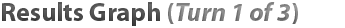
<style>
.page{position:relative;width:345px;height:28px;background:#ffffff}
.page>*{position:absolute;margin:0}
.t1{font:26px "MyriadPro-Bold";color:#464646}
.t2{font:26px "MyriadPro-Bold";color:#898989}
.t3{font:26px "MyriadPro-BoldIt";color:#898989}
</style>
<div class="page">
<p class="t1" style="left:2px;top:2px;width:296px;height:24px">Results Graph <span class="t2">(</span><span class="t3">Turn 1 of 3</span><span class="t2">)</span></p>
</div>
